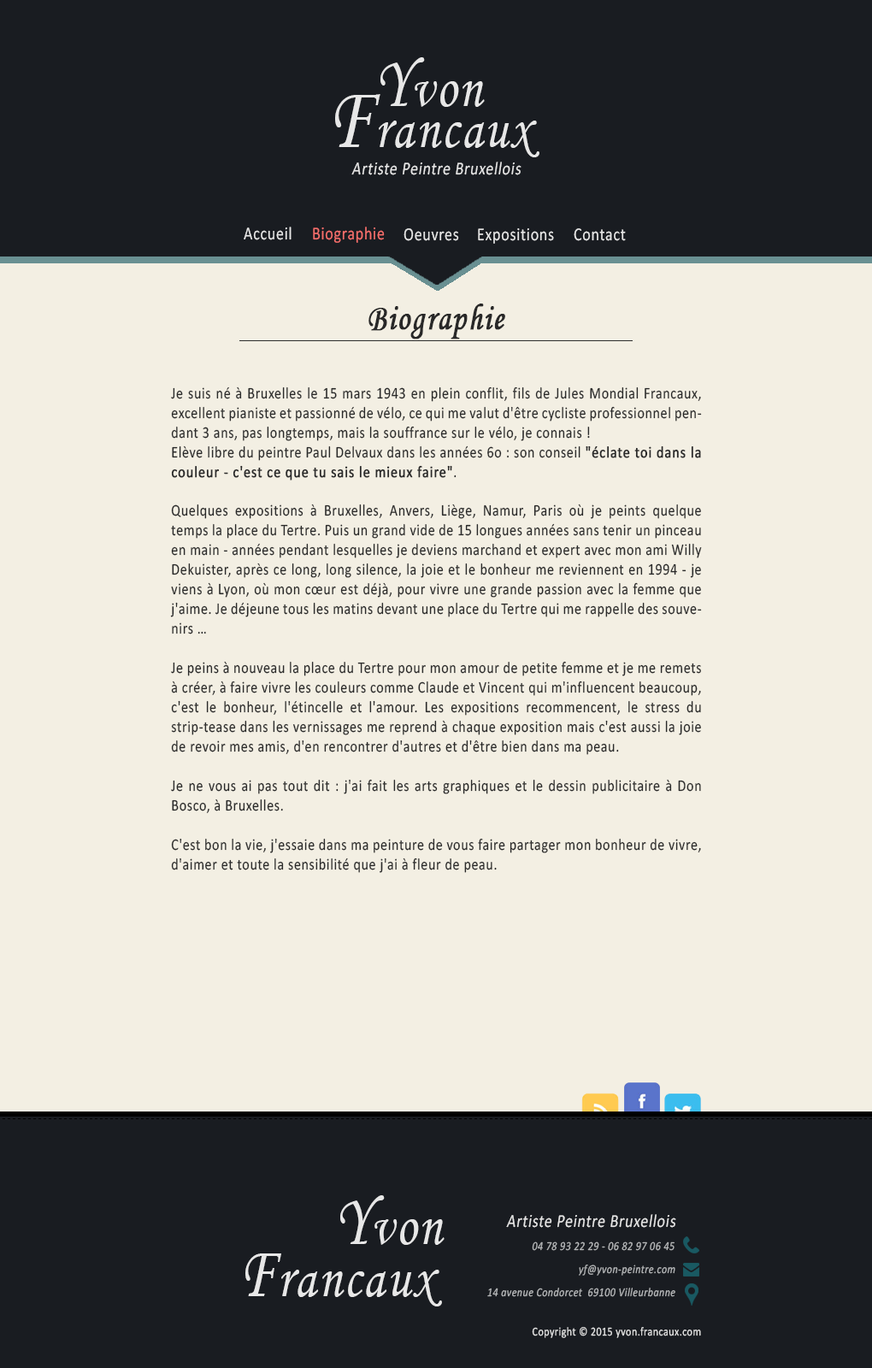
<style>
.page{position:relative;width:872px;height:1368px;background:#f3efe3}
.page>*{position:absolute;margin:0}
.t1{font:61px "MonotypeCorsiva";letter-spacing:0.04em;color:#e7e7e7;scale:0.84 1}
.t2{font:73.2px "MonotypeCorsiva";letter-spacing:0.04em;color:#e7e7e7;scale:0.84 1}
.t3{font:91.5px "MonotypeCorsiva";letter-spacing:0.04em;color:#e7e7e7;scale:0.84 1}
.t4{font:18.3px "Calibri";letter-spacing:0.04em;color:#e7e7e7;font-style:italic;scale:0.84 1}
.t5{font:18.3px "Calibri";letter-spacing:0.04em;color:#e7e7e7;scale:0.84 1}
.t6{font:18.3px "Calibri";letter-spacing:0.04em;color:#f56f6c;scale:0.84 1}
.t7{font:36.6px "MonotypeCorsiva";letter-spacing:0.04em;color:#282828;font-weight:bold;scale:0.84 1}
.t8{font:16.3px/19.7px "Calibri";letter-spacing:0.04em;color:#292929;scale:0.84 1}
.t9{font:16.3px/19.7px "Calibri";letter-spacing:0.04em;color:#292929;font-weight:bold;scale:0.84 1}
.t10{font:12.2px "Calibri-Italic";letter-spacing:0.04em;color:#b6b8ba;scale:0.84 1}
.t11{font:12.2px "Calibri";letter-spacing:0.04em;color:#e7e7e7;scale:0.84 1}
</style>
<div class="page">
<p class="t1" style="left:380px;top:57px;width:105px;height:50px"><span class="t2">Y</span>von</p>
<p class="t1" style="left:335px;top:94px;width:204px;height:63px"><span class="t3">F</span>rancaux</p>
<p class="t4" style="left:351px;top:162px;width:170px;height:13px">Artiste Peintre Bruxellois</p>
<p class="t5" style="left:244px;top:227px;width:47px;height:13px">Accueil</p>
<p class="t6" style="left:313px;top:227px;width:72px;height:16px">Biographie</p>
<p class="t5" style="left:403px;top:228px;width:56px;height:13px">Oeuvres</p>
<p class="t5" style="left:478px;top:228px;width:76px;height:16px">Expositions</p>
<p class="t5" style="left:574px;top:228px;width:52px;height:13px">Contact</p>
<p class="t7" style="left:368px;top:303px;width:137px;height:36px">Biographie</p>
<p class="t8" style="left:170px;top:386px;width:532px;height:487px;text-align:justify">Je suis né à Bruxelles le 15 mars 1943 en plein conflit, fils de Jules Mondial Francaux, excellent pianiste et passionné de vélo, ce qui me valut d'être cycliste professionnel pendant 3 ans, pas longtemps, mais la souffrance sur le vélo, je connais !<br>Elève libre du peintre Paul Delvaux dans les années 6o : son conseil <span class="t9">"éclate toi dans la couleur - c'est ce que tu sais le mieux faire"</span>.<br><br>Quelques expositions à Bruxelles, Anvers, Liège, Namur, Paris où je peints quelque temps la place du Tertre. Puis un grand vide de 15 longues années sans tenir un pinceau en main - années pendant lesquelles je deviens marchand et expert avec mon ami Willy Dekuister, après ce long, long silence, la joie et le bonheur me reviennent en 1994 - je viens à Lyon, où mon cœur est déjà, pour vivre une grande passion avec la femme que j'aime. Je déjeune tous les matins devant une place du Tertre qui me rappelle des souvenirs …<br><br>Je peins à nouveau la place du Tertre pour mon amour de petite femme et je me remets à créer, à faire vivre les couleurs comme Claude et Vincent qui m'influencent beaucoup, c'est le bonheur, l'étincelle et l'amour. Les expositions recommencent, le stress du strip-tease dans les vernissages me reprend à chaque exposition mais c'est aussi la joie de revoir mes amis, d'en rencontrer d'autres et d'être bien dans ma peau.<br> <br>Je ne vous ai pas tout dit : j'ai fait les arts graphiques et le dessin publicitaire à Don Bosco, à Bruxelles.<br><br>C'est bon la vie, j'essaie dans ma peinture de vous faire partager mon bonheur de vivre, d'aimer et toute la sensibilité que j'ai à fleur de peau.</p>
<p class="t1" style="left:340px;top:1195px;width:104px;height:50px"><span class="t2">Y</span>von</p>
<p class="t4" style="left:506px;top:1214px;width:170px;height:13px">Artiste Peintre Bruxellois</p>
<p class="t10" style="left:532px;top:1241px;width:142px;height:10px">04 78 93 22 29 - 06 82 97 06 45</p>
<p class="t1" style="left:245px;top:1253px;width:197px;height:53px"><span class="t2">F</span>rancaux</p>
<p class="t10" style="left:579px;top:1264px;width:96px;height:11px">yf@yvon-peintre.com</p>
<p class="t10" style="left:487px;top:1287px;width:188px;height:10px">14 avenue Condorcet  69100 Villeurbanne</p>
<p class="t11" style="left:532px;top:1327px;width:169px;height:11px">Copyright © 2015 yvon.francaux.com</p>
</div>
